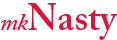
<style>
.page{position:relative;width:117px;height:40px;background:#ffffff}
.page>*{position:absolute;margin:0}
.t1{font:37.6px "ACaslonPro-Semibold";color:#dc143c}
.t2{font:24px "ACaslonPro-SemiboldItalic";letter-spacing:-0.05em;color:#dc143c}
</style>
<div class="page">
<p class="t1" style="left:1px;top:3px;width:116px;height:37px"><span class="t2">mk</span>Nasty</p>
</div>
